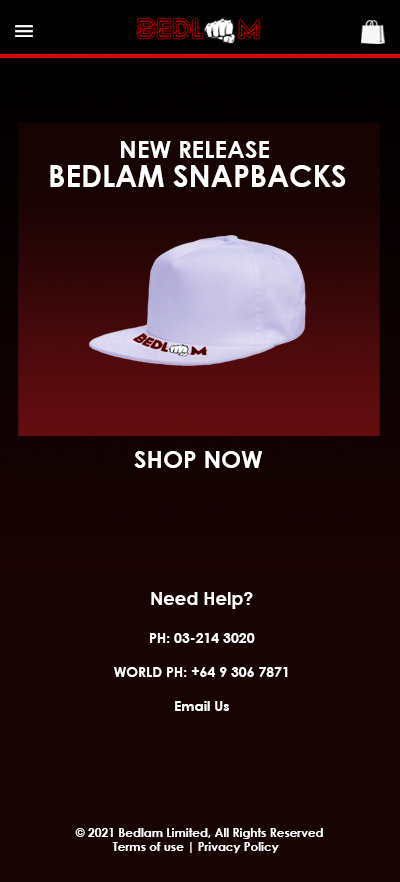
<style>
.page{position:relative;width:400px;height:882px;background:#180303}
.page>*{position:absolute;margin:0}
.t1{font:24px "CenturyGothic-Bold";color:#ffffff}
.t2{font:30px "CenturyGothic-Bold";color:#ffffff}
.t3{font:14px "CenturyGothic-Bold";color:#ffffff}
.t4{font:18px "CenturyGothic-Bold";color:#ffffff}
.t5{font:12px "CenturyGothic-Bold";color:#ffffff}
</style>
<div class="page">
<p class="t1" style="left:121px;top:141px;width:148px;height:17px">NEW RELEASE</p>
<p class="t2" style="left:50px;top:165px;width:296px;height:22px">BEDLAM SNAPBACKS</p>
<p class="t1" style="left:134px;top:451px;width:128px;height:17px">SHOP NOW</p>
<p class="t3" style="left:114px;top:592px;width:174px;height:119px;text-align:center"><span class="t4">Need Help?<br><br></span>PH: 03-214 3020<br><br>WORLD PH: +64 9 306 7871<br><br>Email Us</p>
<p class="t5" style="left:75px;top:828px;width:248px;height:25px">© 2021 Bedlam Limited, All Rights Reserved<br>           Terms of use | Privacy Policy</p>
</div>
